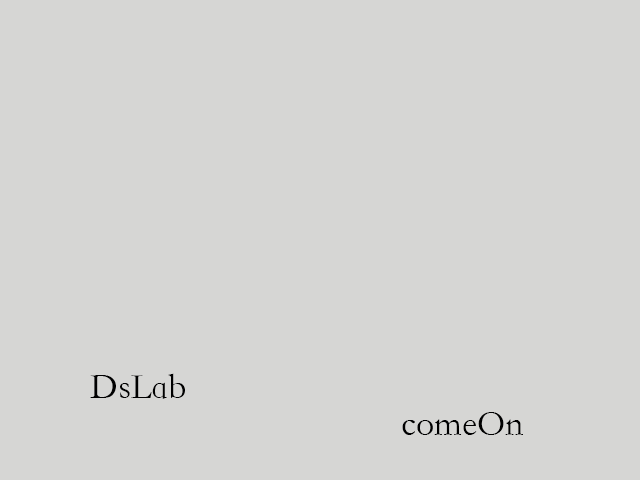
<style>
.page{position:relative;width:640px;height:480px;background:#d6d6d4}
.page>*{position:absolute;margin:0}
.t1{font:36px "STFangsong";color:#000000}
</style>
<div class="page">
<p class="t1" style="left:90px;top:373px;width:95px;height:26px">DsLab</p>
<p class="t1" style="left:402px;top:412px;width:121px;height:23px">comeOn</p>
</div>
